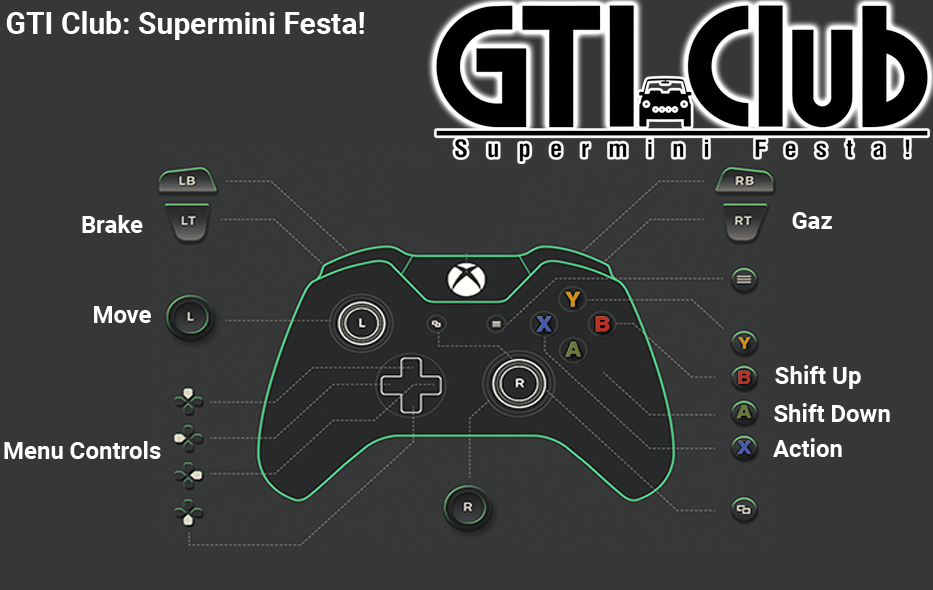
<style>
.page{position:relative;width:933px;height:590px;background:#363838}
.page>*{position:absolute;margin:0}
.t1{font:30px "Roboto-Bold";color:#ffffff}
.t2{font:24px "Roboto-Bold";color:#ffffff}
</style>
<div class="page">
<p class="t1" style="left:6px;top:11px;width:358px;height:29px">GTI Club: Supermini Festa!</p>
<p class="t2" style="left:82px;top:215px;width:61px;height:18px">Brake</p>
<p class="t2" style="left:792px;top:212px;width:40px;height:17px">Gaz</p>
<p class="t2" style="left:94px;top:306px;width:57px;height:17px">Move</p>
<p class="t2" style="left:775px;top:365px;width:86px;height:24px">Shift Up</p>
<p class="t2" style="left:774px;top:403px;width:116px;height:19px">Shift Down</p>
<p class="t2" style="left:773px;top:438px;width:69px;height:19px">Action</p>
<p class="t2" style="left:4px;top:441px;width:157px;height:18px">Menu Controls</p>
</div>
